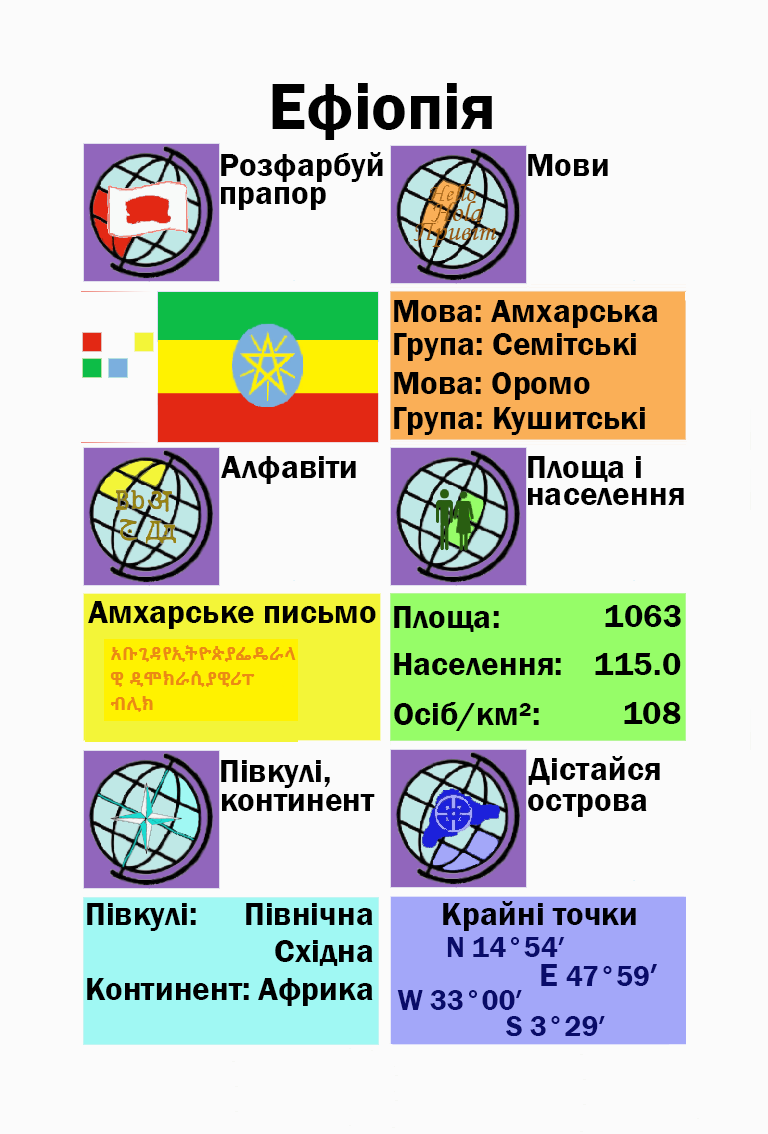
<style>
.page{position:relative;width:768px;height:1134px;background:#fbfbfb}
.page>*{position:absolute;margin:0}
.t1{font:66.7px "FranklinGothic-Demi";color:#000000}
.t2{font:33.3px "FranklinGothic-Demi";color:#000000}
.t3{font:33.3px "FranklinGothic-Demi";color:#000003}
.t4{font:29.2px "FranklinGothic-Demi";color:#090c69}
.t5{font:33.3px "FranklinGothic-Demi";color:#090c69}
</style>
<div class="page">
<p class="t1" style="left:272px;top:83px;width:220px;height:57px">Ефіопія</p>
<p class="t2" style="left:221px;top:152px;width:162px;height:30px">Розфарбуй</p>
<p class="t2" style="left:528px;top:154px;width:80px;height:22px">Мови</p>
<p class="t2" style="left:221px;top:187px;width:105px;height:23px">прапор</p>
<p class="t2" style="left:394px;top:300px;width:264px;height:28px">Мова: Амхарська</p>
<p class="t2" style="left:394px;top:333px;width:242px;height:28px">Група: Семітські</p>
<p class="t2" style="left:394px;top:372px;width:196px;height:28px">Мова: Оромо</p>
<p class="t2" style="left:394px;top:407px;width:251px;height:28px">Група: Кушитські</p>
<p class="t2" style="left:221px;top:456px;width:135px;height:28px">Алфавіти</p>
<p class="t2" style="left:528px;top:456px;width:113px;height:26px">Площа і</p>
<p class="t2" style="left:528px;top:488px;width:156px;height:17px">населення</p>
<p class="t2" style="left:88px;top:601px;width:288px;height:28px">Амхарське письмо</p>
<p class="t2" style="left:394px;top:606px;width:105px;height:26px">Площа:</p>
<p class="t3" style="left:605px;top:605px;width:76px;height:22px">1063</p>
<p class="t2" style="left:394px;top:653px;width:167px;height:22px">Населення:</p>
<p class="t2" style="left:595px;top:653px;width:86px;height:22px">115.0</p>
<p class="t2" style="left:394px;top:702px;width:145px;height:29px">Осіб/км²:</p>
<p class="t2" style="left:624px;top:702px;width:57px;height:22px">108</p>
<p class="t2" style="left:221px;top:760px;width:109px;height:28px">Півкулі,</p>
<p class="t2" style="left:528px;top:756px;width:132px;height:29px">Дістайся</p>
<p class="t2" style="left:222px;top:794px;width:153px;height:17px">континент</p>
<p class="t2" style="left:528px;top:794px;width:119px;height:23px">острова</p>
<p class="t2" style="left:87px;top:903px;width:109px;height:28px">Півкулі:</p>
<p class="t2" style="left:246px;top:903px;width:127px;height:22px">Північна</p>
<p class="t3" style="left:443px;top:901px;width:193px;height:30px">Крайні точки</p>
<p class="t2" style="left:275px;top:940px;width:98px;height:26px">Східна</p>
<p class="t4" style="left:447px;top:937px;width:118px;height:20px">N 14°54′</p>
<p class="t4" style="left:541px;top:964px;width:116px;height:22px"><span class="t5">E </span>47°59<span class="t5">′</span></p>
<p class="t2" style="left:87px;top:978px;width:162px;height:22px">Континент:</p>
<p class="t2" style="left:258px;top:978px;width:115px;height:28px">Африка</p>
<p class="t4" style="left:397px;top:990px;width:125px;height:20px">W 33°00′</p>
<p class="t4" style="left:506px;top:1016px;width:99px;height:21px">S 3°29′</p>
</div>
